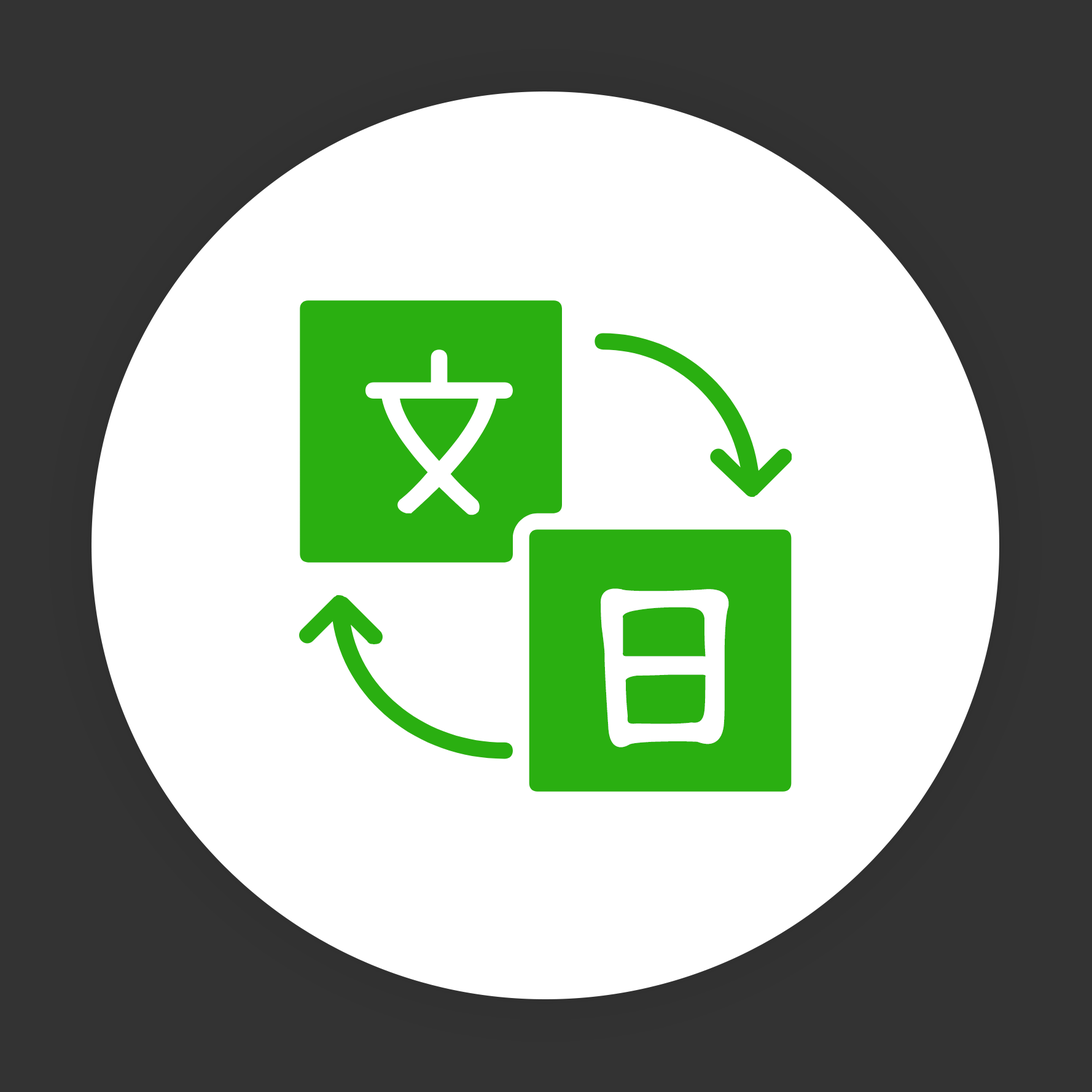
<style>
.page{position:relative;width:1092px;height:1092px;background:#ffffff}
.page>*{position:absolute;margin:0}
.t1{font:245.7px "FZLBK--GBK1-0";color:#ffffff;font-weight:bold}
</style>
<div class="page">
<p class="t1" style="left:601px;top:588px;width:128px;height:159px">日</p>
</div>
